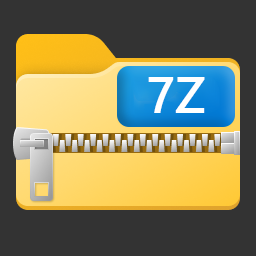
<style>
.page{position:relative;width:256px;height:256px;background:#333333}
.page>*{position:absolute;margin:0}
.t1{font:52px "SegoeUI-Semibold";color:#ffffff}
</style>
<div class="page">
<p class="t1" style="left:148px;top:77px;width:57px;height:36px">7Z</p>
</div>
